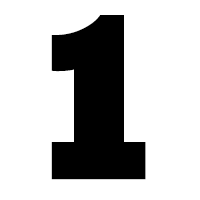
<style>
.page{position:relative;width:200px;height:200px;background:#ffffff}
.page>*{position:absolute;margin:0}
.t1{font:236.9px "Rockwell-ExtraBold";color:#000000}
</style>
<div class="page">
<p class="t1" style="left:51px;top:15px;width:95px;height:165px">1</p>
</div>
